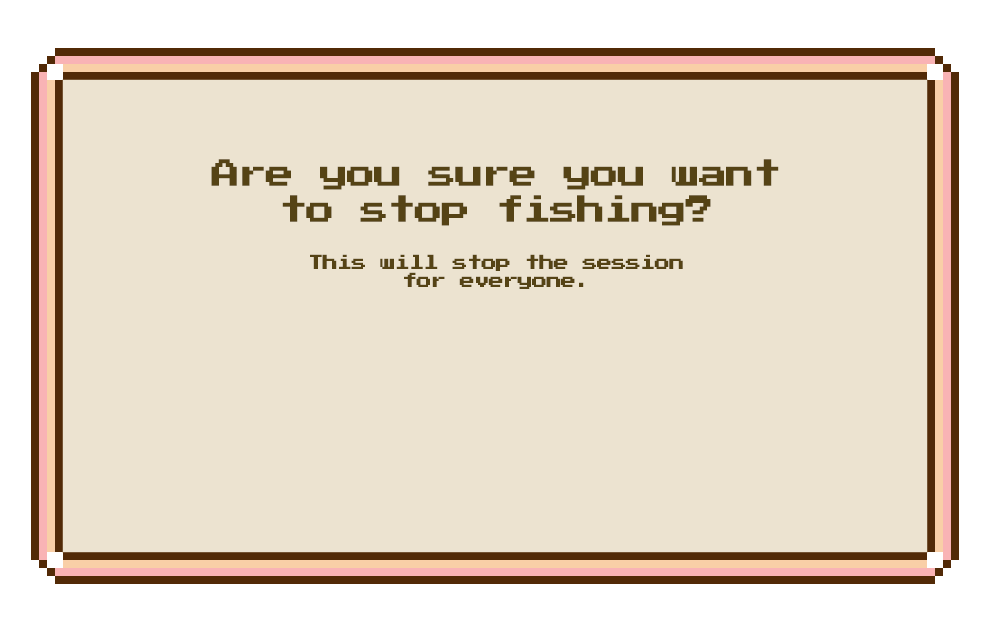
<style>
.page{position:relative;width:992px;height:622px;background:#ece3d0}
.page>*{position:absolute;margin:0}
.t1{font:30px "PressStart2P";letter-spacing:-0.05em;color:#554315;scale:0.95 1}
.t2{font:16px/18px "PressStart2P";letter-spacing:-0.05em;color:#554315;scale:0.95 1}
</style>
<div class="page">
<p class="t1" style="left:211px;top:159px;width:568px;height:67px;text-align:center">Are you sure you want<br>to stop fishing?</p>
<p class="t2" style="left:310px;top:254px;width:373px;height:35px;text-align:center">This will stop the session<br>for everyone.</p>
</div>
